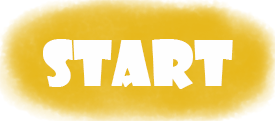
<style>
.page{position:relative;width:275px;height:121px}
.page>*{position:absolute;margin:0}
.t1{font:59.6px "ShowcardGothic-Reg";color:#fefefe;font-weight:bold}
</style>
<div class="page">
<p class="t1" style="left:43px;top:39px;width:190px;height:50px">START</p>
</div>
